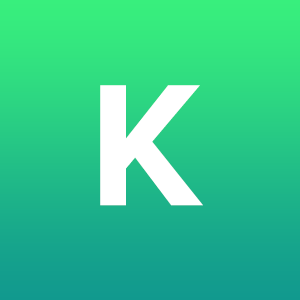
<style>
.page{position:relative;width:300px;height:300px}
.page>*{position:absolute;margin:0}
.t1{font:179.4px "ProximaNova-Bold";color:#ffffff}
</style>
<div class="page">
<p class="t1" style="left:100px;top:85px;width:103px;height:121px">K</p>
</div>
